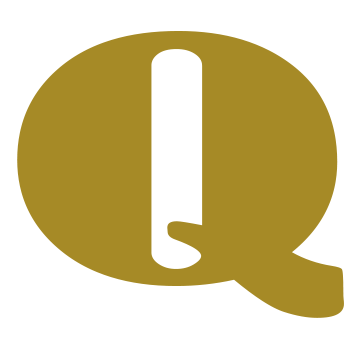
<style>
.page{position:relative;width:354px;height:354px;background:#ffffff}
.page>*{position:absolute;margin:0}
.t1{font:316.2px "BernardMT-Condensed";color:#a68a26;scale:2.07 1}
</style>
<div class="page">
<p class="t1" style="left:17px;top:31px;width:327px;height:287px">Q</p>
</div>
